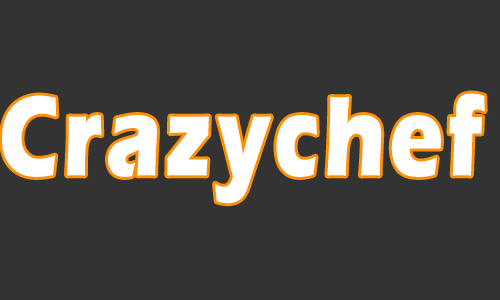
<style>
.page{position:relative;width:500px;height:300px;background:#333333}
.page>*{position:absolute;margin:0}
.t1{font:116.7px "ErasITC-Bold";letter-spacing:0.025em;color:#ffffff;font-weight:bold;scale:0.77 1}
</style>
<div class="page">
<p class="t1" style="left:2px;top:93px;width:483px;height:111px">Crazychef</p>
</div>
